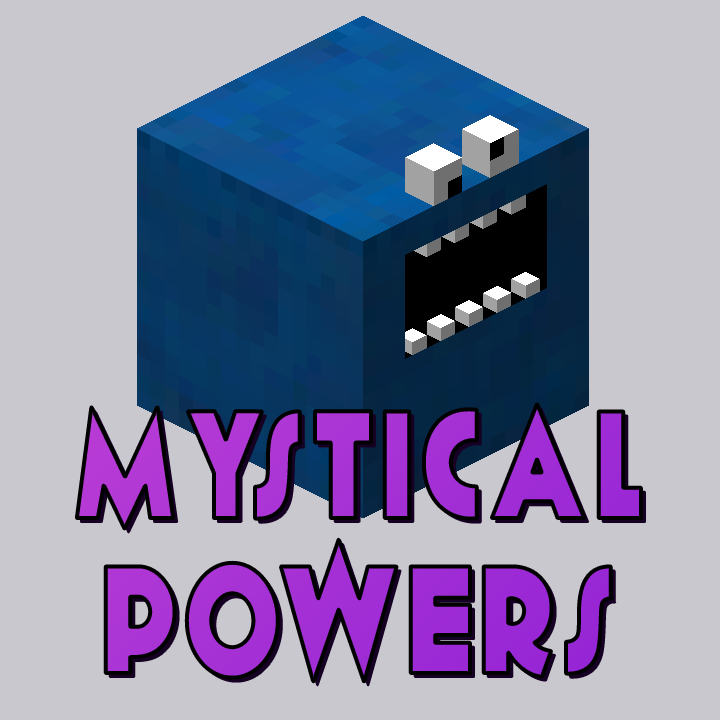
<style>
.page{position:relative;width:720px;height:720px;background:#c8c8ce}
.page>*{position:absolute;margin:0}
.t1{font:151px/51.9px "Geomancy-ExtraBold";letter-spacing:0.05em;color:#a12ed5;scale:0.8 1}
</style>
<div class="page">
<p class="t1" style="left:77px;top:404px;width:564px;height:278px;text-align:center">MYSTICAL<br><br><br>POWERS</p>
</div>
